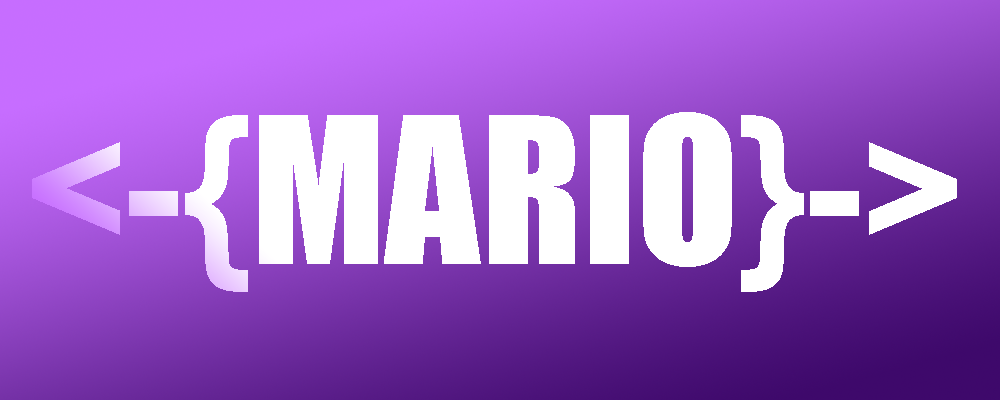
<style>
.page{position:relative;width:1000px;height:400px}
.page>*{position:absolute;margin:0}
.t1{font:187.5px "Impact";color:#ffffff}
</style>
<div class="page">
<p class="t1" style="left:32px;top:112px;width:925px;height:180px">&lt;-{MARIO}-&gt;</p>
</div>
